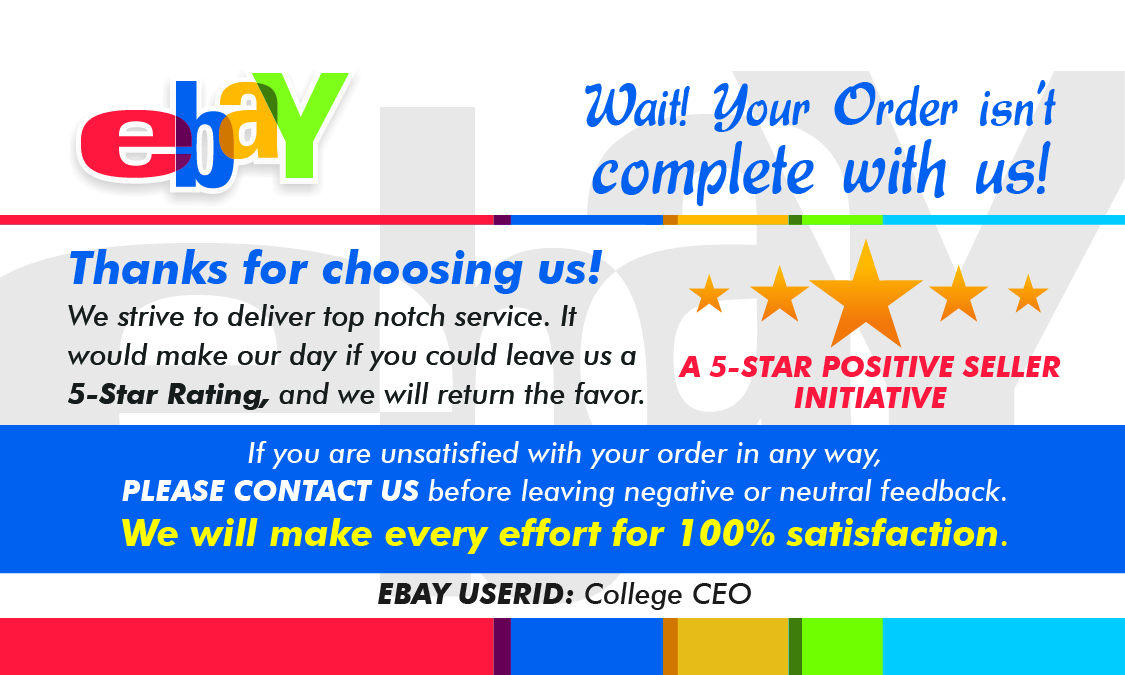
<style>
.page{position:relative;width:1125px;height:675px;background:#ffffff}
.page>*{position:absolute;margin:0}
.t1{font:59px "Express";color:#0060f0}
.t2{font:78.5px "Express";color:#0060f0}
.t3{font:45.8px "FuturaBT-BoldItalic";color:#0060f0}
.t4{font:29.2px/33.2px "FuturaBT-MediumItalic";color:#161a1b}
.t5{font:29.2px/33.2px "FuturaBT-BoldItalic";color:#161a1b}
.t6{font:29.2px/30.3px "FuturaBT-BoldItalic";color:#ff173d}
.t7{font:29.2px/37.5px "FuturaBT-MediumItalic";color:#ffffff}
.t8{font:29.2px/37.5px "FuturaBT-BoldItalic";color:#ffffff}
.t9{font:37.5px "FuturaBT-BoldItalic";color:#ffff00}
.t10{font:37.5px "FuturaBT-MediumItalic";color:#ffff00}
.t11{font:29.2px "FuturaBT-BoldItalic";color:#191919}
.t12{font:29.2px "FuturaBT-MediumItalic";color:#191919}
</style>
<div class="page">
<p class="t1" style="left:585px;top:80px;width:471px;height:52px">Wait! Your Order isn’t</p>
<p class="t2" style="left:592px;top:139px;width:459px;height:67px">complete with us!</p>
<p class="t3" style="left:70px;top:249px;width:533px;height:45px">Thanks for choosing us!</p>
<p class="t4" style="left:68px;top:304px;width:576px;height:106px">We strive to deliver top notch service. It<br>would make our day if you could leave us a<br><span class="t5">5-Star Rating,</span> and we will return the favor.</p>
<p class="t6" style="left:678px;top:356px;width:383px;height:52px;text-align:center">A 5-STAR POSITIVE SELLER<br>INITIATIVE</p>
<p class="t7" style="left:122px;top:441px;width:884px;height:66px;text-align:center">If you are unsatisfied with your order in any way,<br><span class="t8">PLEASE CONTACT US </span>before leaving negative or neutral feedback.</p>
<p class="t9" style="left:122px;top:518px;width:885px;height:36px">We will make every effort for 100% satisfaction<span class="t10">.</span></p>
<p class="t11" style="left:378px;top:582px;width:373px;height:28px">EBAY USERID:<span class="t12"> College CEO</span></p>
</div>
